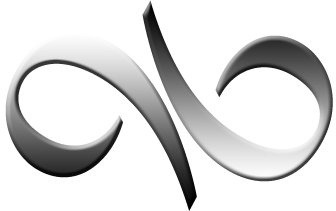
<style>
.page{position:relative;width:336px;height:211px;background:#ffffff}
.page>*{position:absolute;margin:0}
.t1{font:290px "CharlemagneStd-Bold";letter-spacing:0.01em}
</style>
<div class="page">
<p class="t1" style="left:142px;top:0px;width:191px;height:182px;rotate:121deg">9</p>
<p class="t1" style="left:5px;top:31px;width:192px;height:180px;rotate:-60deg">9</p>
</div>
